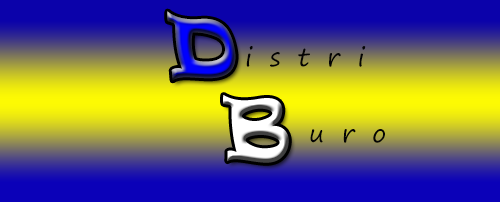
<style>
.page{position:relative;width:500px;height:202px}
.page>*{position:absolute;margin:0}
.t1{font:83.4px "Ravie"}
.t2{font:25px "SegoePrint";letter-spacing:0.7em;color:#040404}
</style>
<div class="page">
<p class="t1" style="left:167px;top:11px;width:69px;height:70px">D</p>
<p class="t2" style="left:246px;top:46px;width:120px;height:21px">istri</p>
<p class="t2" style="left:310px;top:129px;width:75px;height:14px">uro</p>
</div>
